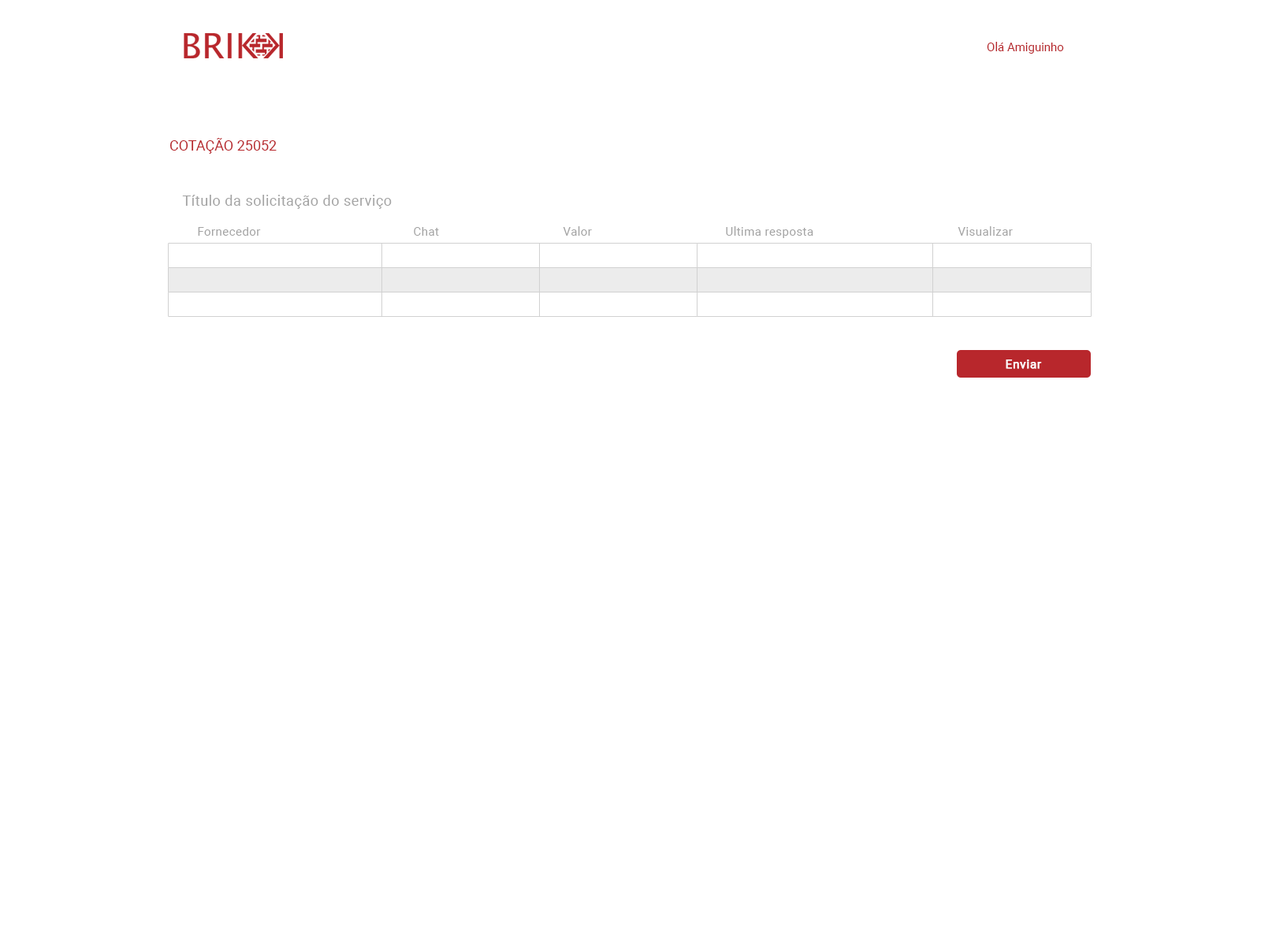
<style>
.page{position:relative;width:1261px;height:946px;background:#ffffff}
.page>*{position:absolute;margin:0}
.t1{font:11.8px "Roboto-Regular";color:#b8272c}
.t2{font:14.2px "Roboto-Regular";color:#b8272c}
.t3{font:14.2px "Roboto-Regular";letter-spacing:0.03em;color:#a4a4a4}
.t4{font:11.8px "Roboto-Regular";letter-spacing:0.03em;color:#a4a4a4}
.t5{font:11.8px "Roboto-Regular";letter-spacing:0.03em;color:#ffffff;font-weight:bold}
</style>
<div class="page">
<p class="t1" style="left:987px;top:42px;width:77px;height:12px">Olá Amiguinho</p>
<p class="t2" style="left:169px;top:138px;width:108px;height:16px">COTAÇÃO 25052</p>
<p class="t3" style="left:182px;top:195px;width:210px;height:14px">Título da solicitação do serviço</p>
<p class="t4" style="left:198px;top:227px;width:63px;height:9px">Fornecedor</p>
<p class="t4" style="left:414px;top:227px;width:25px;height:9px">Chat</p>
<p class="t4" style="left:563px;top:226px;width:29px;height:10px">Valor</p>
<p class="t4" style="left:726px;top:226px;width:87px;height:12px">Ultima resposta</p>
<p class="t4" style="left:958px;top:226px;width:55px;height:10px">Visualizar</p>
<p class="t5" style="left:1006px;top:359px;width:36px;height:10px">Enviar</p>
</div>
